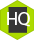
<style>
.page{position:relative;width:34px;height:40px;background:#ffffff}
.page>*{position:absolute;margin:0}
.t1{font:18px "MyriadPro-Regular";color:#ffffff}
</style>
<div class="page">
<p class="t1" style="left:7px;top:12px;width:23px;height:15px">HQ</p>
</div>
